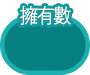
<style>
.page{position:relative;width:90px;height:75px;background:#078081}
.page>*{position:absolute;margin:0}
.t1{font:20px "GothicMB101Pr6N-Light";letter-spacing:-0.08em;color:#fff6f3;scale:0.9 1}
</style>
<div class="page">
<p class="t1" style="left:20px;top:5px;width:51px;height:20px">擁有數</p>
</div>
